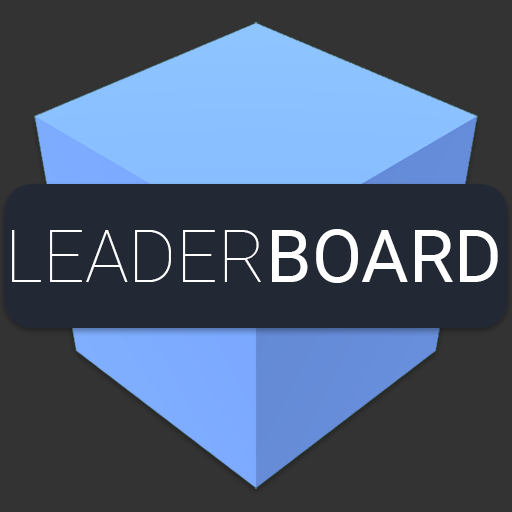
<style>
.page{position:relative;width:512px;height:512px;background:#333333}
.page>*{position:absolute;margin:0}
.t1{font:73.3px "Roboto-Thin";color:#ffffff}
.t2{font:73.3px "Roboto-Regular";color:#ffffff}
</style>
<div class="page">
<p class="t1" style="left:12px;top:229px;width:486px;height:54px">LEADER<span class="t2">BOARD</span></p>
</div>
